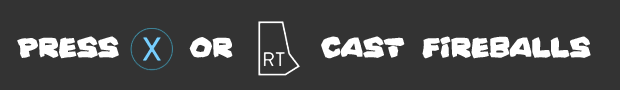
<style>
.page{position:relative;width:620px;height:90px;background:#333333}
.page>*{position:absolute;margin:0}
.t1{font:22px "PrehistoricCaveman";color:#ffffff}
</style>
<div class="page">
<p class="t1" style="left:17px;top:36px;width:574px;height:23px">press    or     cast fireballs</p>
</div>
